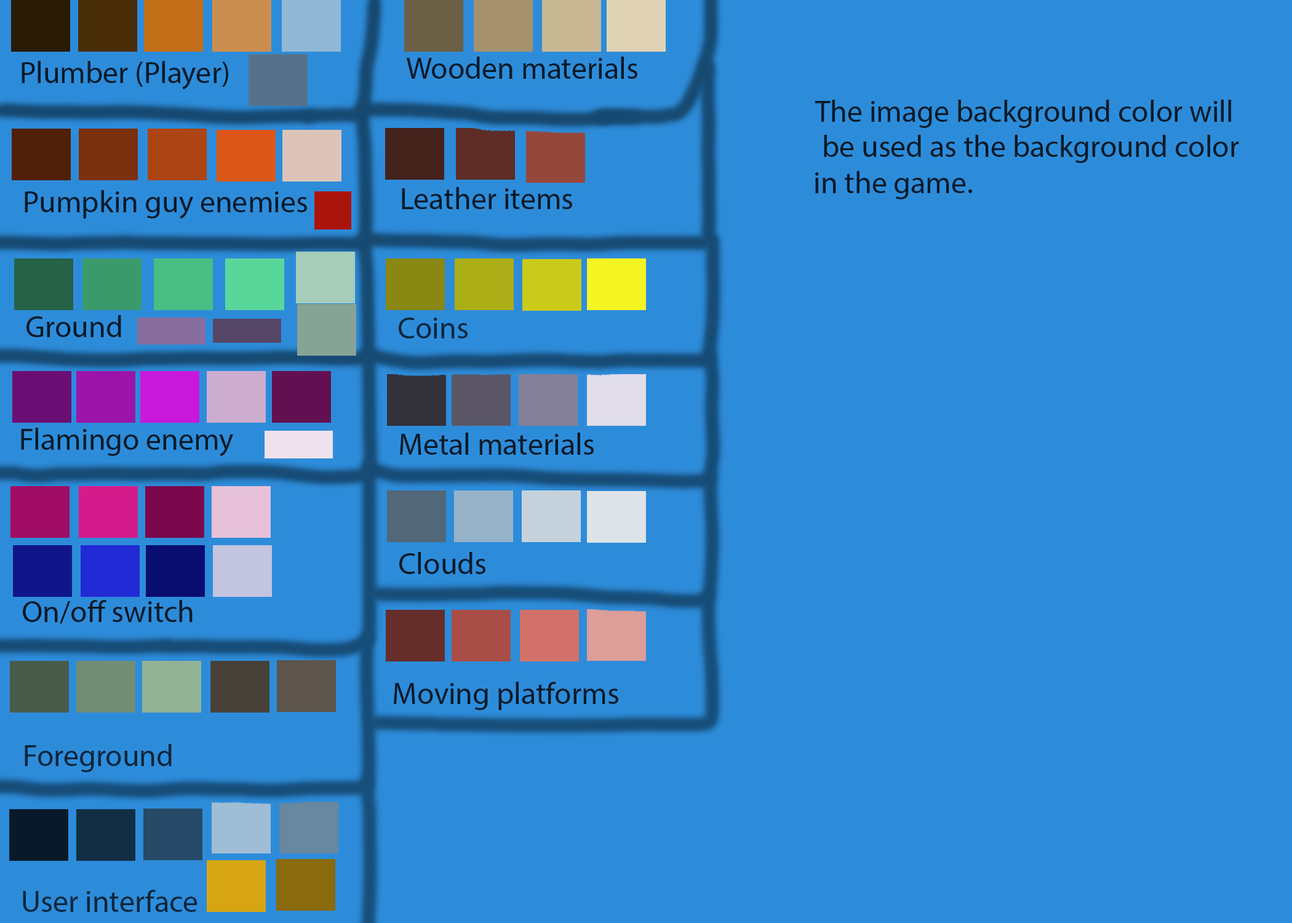
<style>
.page{position:relative;width:1292px;height:923px;background:#2d8cda}
.page>*{position:absolute;margin:0}
.t1{font:30.8px "MyriadPro-Regular";color:#081a28}
.t2{font:30.8px "MyriadPro-Regular";color:#0b263c}
</style>
<div class="page">
<p class="t1" style="left:22px;top:61px;width:206px;height:29px">Plumber (Player)</p>
<p class="t1" style="left:406px;top:57px;width:231px;height:22px">Wooden materials</p>
<p class="t1" style="left:815px;top:100px;width:416px;height:28px">The image background color will</p>
<p class="t1" style="left:824px;top:135px;width:415px;height:28px">be used as the background color</p>
<p class="t1" style="left:815px;top:171px;width:157px;height:28px">in the game.</p>
<p class="t1" style="left:25px;top:190px;width:282px;height:29px">Pumpkin guy enemies</p>
<p class="t1" style="left:402px;top:187px;width:170px;height:22px">Leather items</p>
<p class="t1" style="left:26px;top:315px;width:95px;height:22px">Ground</p>
<p class="t2" style="left:399px;top:317px;width:69px;height:21px">Coins</p>
<p class="t1" style="left:21px;top:428px;width:212px;height:29px">Flamingo enemy</p>
<p class="t1" style="left:400px;top:433px;width:194px;height:22px">Metal materials</p>
<p class="t1" style="left:399px;top:552px;width:86px;height:22px">Clouds</p>
<p class="t1" style="left:23px;top:600px;width:170px;height:24px">On/off switch</p>
<p class="t1" style="left:394px;top:682px;width:224px;height:28px">Moving platforms</p>
<p class="t2" style="left:25px;top:744px;width:147px;height:28px">Foreground</p>
<p class="t2" style="left:23px;top:890px;width:174px;height:22px">User interface</p>
</div>
